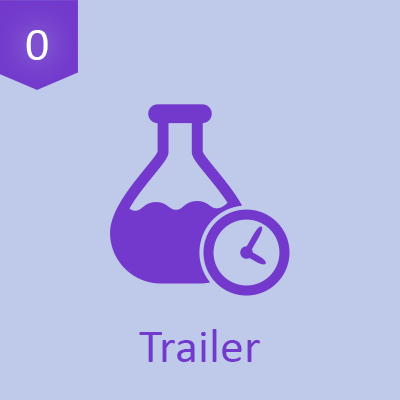
<style>
.page{position:relative;width:400px;height:400px;background:#bfc9e9}
.page>*{position:absolute;margin:0}
.t1{font:48px "Calibri";color:#ffffff}
.t2{font:48px "Calibri";color:#7239cc}
</style>
<div class="page">
<p class="t1" style="left:26px;top:30px;width:22px;height:30px">0</p>
<p class="t2" style="left:139px;top:329px;width:121px;height:33px">Trailer</p>
</div>
